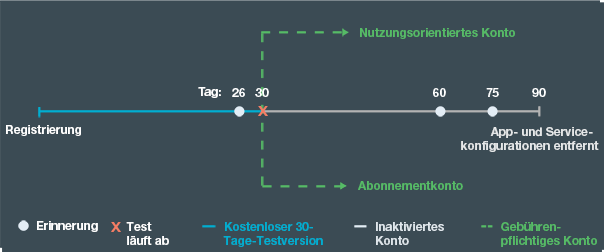
<style>
.page{position:relative;width:604px;height:252px;background:#3b4b54}
.page>*{position:absolute;margin:0}
.t1{font:11.9px "HelveticaNeue-Bold";color:#56bb66}
.t2{font:11.9px "HelveticaNeue-Bold";color:#ffffff}
.t3{font:11.9px "HelvNeueBoldforIBM";color:#ffffff}
.t4{font:12.7px "HelvNeueBoldforIBM";color:#f47d64;scale:1.17 1}
.t5{font:11.9px "HelveticaNeue-Bold";color:#e5e7e8}
.t6{font:11.9px "HelveticaNeue-Bold";color:#00aed1}
.t7{font:11.9px "HelveticaNeue-Bold";color:#dfe6eb}
</style>
<div class="page">
<p class="t1" style="left:360px;top:28px;width:155px;height:11px">Nutzungsorientiertes Konto</p>
<p class="t2" style="left:198px;top:87px;width:23px;height:11px">Tag:</p>
<p class="t3" style="left:232px;top:88px;width:13px;height:9px">26</p>
<p class="t3" style="left:255px;top:88px;width:14px;height:9px">30</p>
<p class="t3" style="left:433px;top:88px;width:13px;height:9px">60</p>
<p class="t3" style="left:486px;top:88px;width:13px;height:9px">75</p>
<p class="t3" style="left:532px;top:88px;width:14px;height:9px">90</p>
<p class="t4" style="left:258px;top:106px;width:10px;height:10px">X</p>
<p class="t2" style="left:6px;top:125px;width:75px;height:11px">Registrierung</p>
<p class="t5" style="left:461px;top:127px;width:138px;height:25px">App- und Service-<br>konfigurationen entfernt</p>
<p class="t1" style="left:358px;top:181px;width:105px;height:9px">Abonnementkonto</p>
<p class="t2" style="left:37px;top:221px;width:61px;height:11px">Erinnerung</p>
<p class="t4" style="left:111px;top:222px;width:10px;height:10px">X</p>
<p class="t2" style="left:126px;top:222px;width:43px;height:23px">Test <br>läuft ab</p>
<p class="t6" style="left:223px;top:222px;width:100px;height:25px">Kostenloser 30-<br>Tage-Testversion</p>
<p class="t7" style="left:376px;top:222px;width:68px;height:23px">Inaktiviertes <br>Konto</p>
<p class="t1" style="left:501px;top:222px;width:96px;height:25px">Gebühren-<br>pflichtiges Konto</p>
</div>
